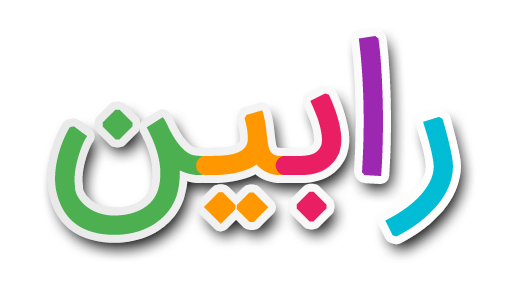
<style>
.page{position:relative;width:512px;height:300px;background:#ffffff}
.page>*{position:absolute;margin:0}
.t1{font:200px "IRANSansWeb-Light";color:#00bcd4;font-weight:bold}
.t2{font:200px "IRANSansWeb-Light";color:#9c27b0;font-weight:bold}
.t3{font:200px "IRANSansWeb-Light";color:#e91e63;font-weight:bold}
.t4{font:200px "IRANSansWeb-Light";color:#ff9800;font-weight:bold}
.t5{font:200px "IRANSansWeb-Light";color:#4caf50;font-weight:bold}
</style>
<div class="page">
<p class="t1" style="left:55px;top:36px;width:398px;height:201px">ر<span class="t2">ا</span><span class="t3">ب</span><span class="t4">ی</span><span class="t5">ن</span></p>
<p class="t1" style="left:55px;top:36px;width:398px;height:201px">ر<span class="t2">ا</span><span class="t3">ب</span><span class="t4">ی</span><span class="t5">ن</span></p>
</div>
